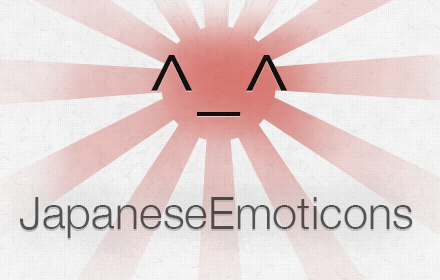
<style>
.page{position:relative;width:440px;height:280px}
.page>*{position:absolute;margin:0}
.t1{font:77.7px "MyriadPro-Regular";color:#151010;scale:1.11 1}
.t2{font:77.7px "MyriadPro-Regular";color:#000000;scale:1.11 1}
.t3{font:45.5px "HelveticaNeue-Light";color:#535252}
.t4{font:45.5px "HelveticaNeue-Light"}
</style>
<div class="page">
<p class="t1" style="left:151px;top:56px;width:137px;height:61px">^_^</p>
<p class="t2" style="left:151px;top:55px;width:137px;height:61px">^_^</p>
<p class="t3" style="left:19px;top:197px;width:394px;height:41px">JapaneseEmoticons</p>
<p class="t4" style="left:19px;top:199px;width:394px;height:41px">JapaneseEmoticons</p>
</div>
